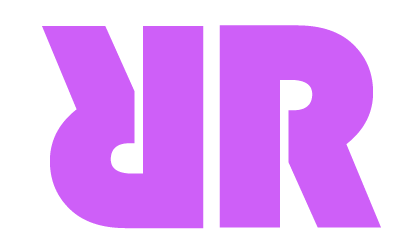
<style>
.page{position:relative;width:417px;height:250px;background:#ffffff}
.page>*{position:absolute;margin:0}
.t1{font:302.9px "Bauhaus93";color:#ce5ff8}
</style>
<div class="page">
<p class="t1" style="left:42px;top:26px;width:162px;height:203px;rotate:180deg">R</p>
<p class="t1" style="left:219px;top:25px;width:162px;height:203px">R</p>
</div>
